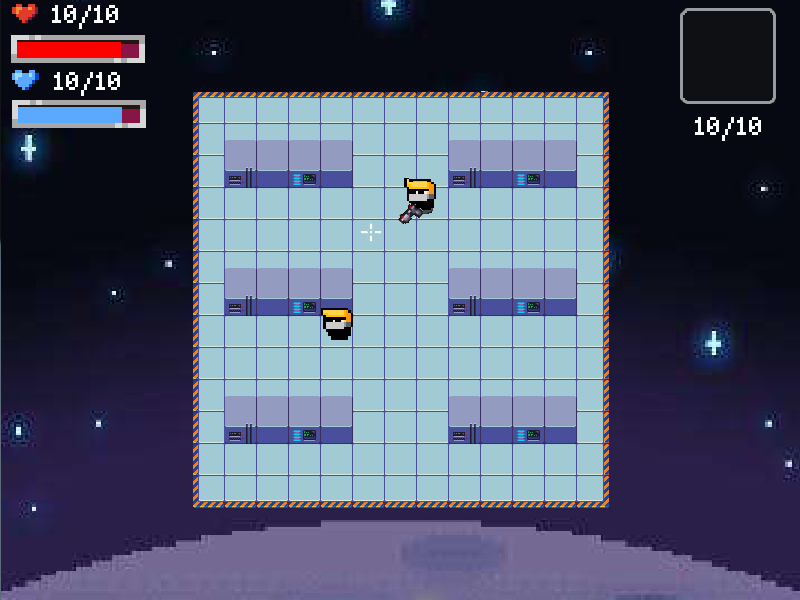
<style>
.page{position:relative;width:800px;height:600px;background:#a1cad4}
.page>*{position:absolute;margin:0}
.t1{font:24px "Mouse";color:#ffffff}
</style>
<div class="page">
<p class="t1" style="left:52px;top:5px;width:66px;height:24px">10/10</p>
<p class="t1" style="left:54px;top:72px;width:66px;height:24px">10/10</p>
<p class="t1" style="left:695px;top:117px;width:66px;height:24px">10/10</p>
</div>
